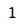
<style>
.page{position:relative;width:25px;height:25px;background:#ffffff}
.page>*{position:absolute;margin:0}
.t1{font:16px "ChessmasterX-Bold";color:#300012}
</style>
<div class="page">
<p class="t1" style="left:9px;top:7px;width:7px;height:11px">1</p>
</div>
